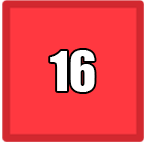
<style>
.page{position:relative;width:144px;height:142px;background:#ff3840}
.page>*{position:absolute;margin:0}
.t1{font:50px "Impact";color:#ffffff}
</style>
<div class="page">
<p class="t1" style="left:50px;top:50px;width:45px;height:42px">16</p>
</div>
